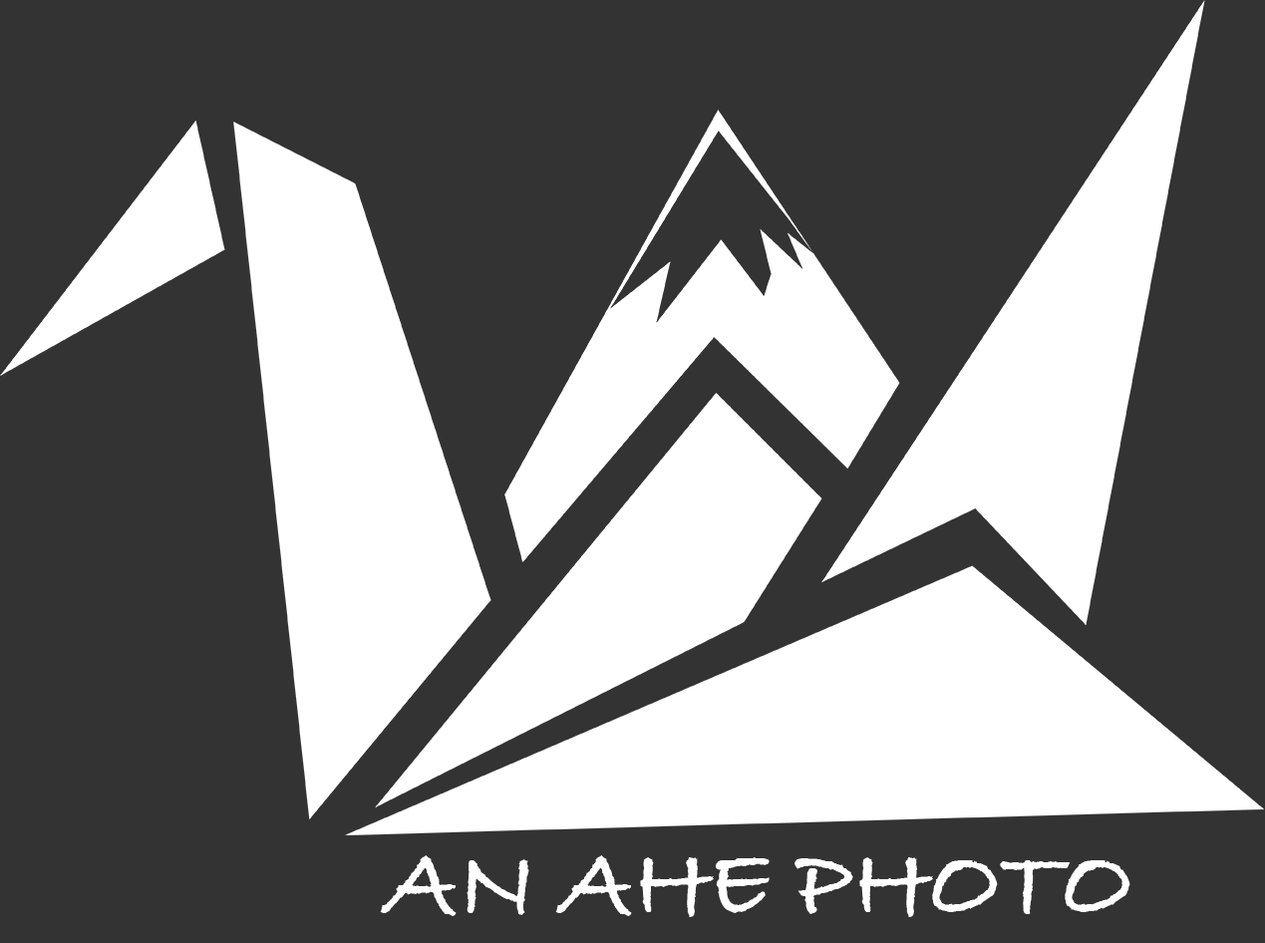
<style>
.page{position:relative;width:1265px;height:943px;background:#333333}
.page>*{position:absolute;margin:0}
.t1{font:99.7px "BradleyHandITCTT-Bold";color:#ffffff}
</style>
<div class="page">
<p class="t1" style="left:380px;top:855px;width:750px;height:62px">AN AHE PHOTO</p>
</div>
